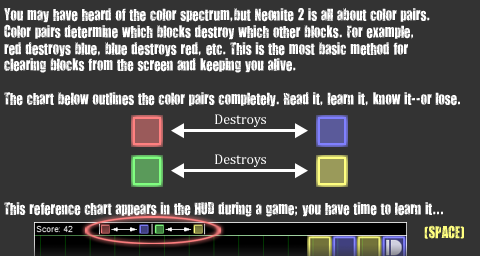
<style>
.page{position:relative;width:480px;height:256px;background:#333333}
.page>*{position:absolute;margin:0}
.t1{font:14px "YouAreLoved";color:#ffffff}
.t2{font:14px "YouAreLoved";color:#ffff80}
.t3{font:14px "Cambria";color:#ffffff}
</style>
<div class="page">
<p class="t1" style="left:4px;top:8px;width:460px;height:231px">You may have heard of the color spectrum,but Neonite 2 is all about color pairs.<br>Color pairs determine which blocks destroy which other blocks. For example,<br>red destroys blue, blue destroys red, etc. This is the most basic method for<br>clearing blocks from the screen and keeping you alive.<br><br>The chart below outlines the color pairs completely. Read it, learn it, know it--or lose.<br><br><br><br><br><br><br><br>                                                                                                            <span class="t2">(SPACE)</span></p>
<p class="t3" style="left:215px;top:114px;width:51px;height:13px">Destroys</p>
<p class="t3" style="left:215px;top:154px;width:51px;height:13px">Destroys</p>
<p class="t1" style="left:4px;top:202px;width:439px;height:15px">This reference chart appears in the HUD during a game; you have time to learn it...</p>
</div>
